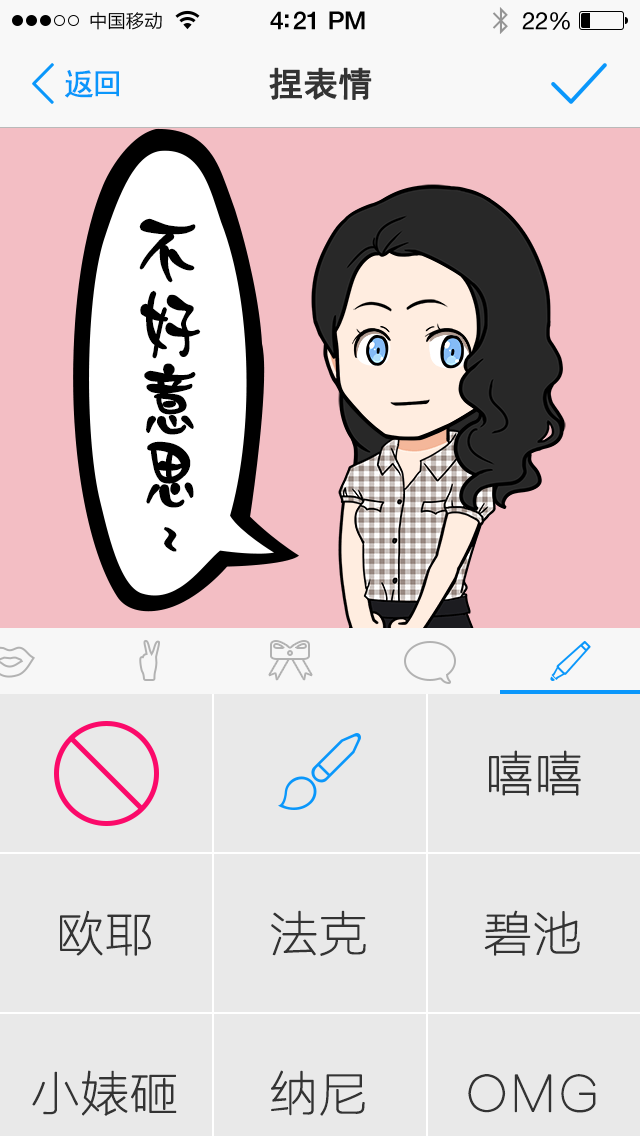
<style>
.page{position:relative;width:640px;height:1136px;background:#e9e9e9}
.page>*{position:absolute;margin:0}
.t1{font:30px "SimHei";letter-spacing:-0.075em;color:#0a97fb;font-weight:bold}
.t2{font:34px "SimHei";letter-spacing:-0.01em;color:#333333;font-weight:bold}
.t3{font:48px "FZLTCXHJW--GB1-0";color:#333333;font-weight:bold}
</style>
<div class="page">
<p class="t1" style="left:65px;top:70px;width:54px;height:28px">返回</p>
<p class="t2" style="left:269px;top:67px;width:103px;height:33px">捏表情</p>
<p class="t3" style="left:489px;top:750px;width:92px;height:46px">嘻嘻</p>
<p class="t3" style="left:60px;top:910px;width:91px;height:46px">欧耶</p>
<p class="t3" style="left:271px;top:910px;width:95px;height:46px">法克</p>
<p class="t3" style="left:484px;top:910px;width:96px;height:46px">碧池</p>
<p class="t3" style="left:32px;top:1070px;width:145px;height:46px">小婊砸</p>
<p class="t3" style="left:271px;top:1070px;width:94px;height:46px">纳尼</p>
<p class="t3" style="left:468px;top:1074px;width:128px;height:39px">OMG</p>
</div>
